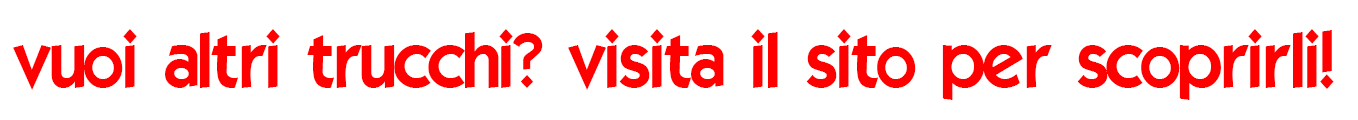
<style>
.page{position:relative;width:1358px;height:120px;background:#ffffff}
.page>*{position:absolute;margin:0}
.t1{font:75px "ELEGANCE";color:#ff0000}
</style>
<div class="page">
<p class="t1" style="left:13px;top:29px;width:1321px;height:71px">vuoi altri trucchi? visita il sito per scoprirli!</p>
</div>
